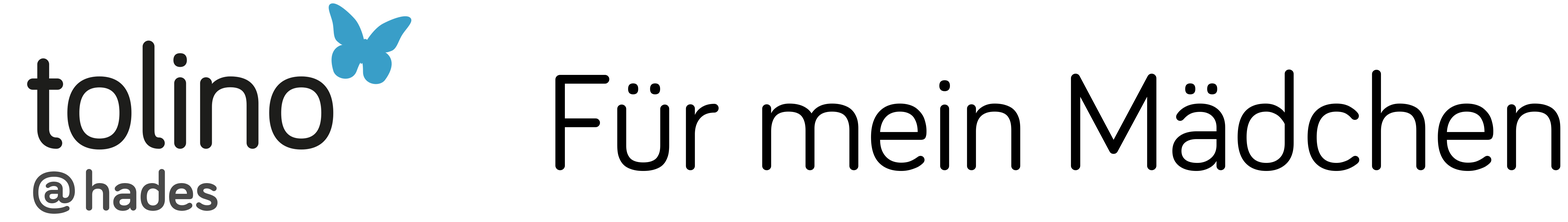
<style>
.page{position:relative;width:1568px;height:222px;background:#ffffff}
.page>*{position:absolute;margin:0}
.t1{font:139.7px "Bariol-Regular";color:#000000}
.t2{font:57.6px "Bariol-Bold";color:#494949}
</style>
<div class="page">
<p class="t1" style="left:555px;top:69px;width:1005px;height:102px">Für mein Mädchen</p>
<p class="t2" style="left:33px;top:171px;width:42px;height:43px">@</p>
<p class="t2" style="left:86px;top:169px;width:132px;height:42px">hades</p>
</div>
